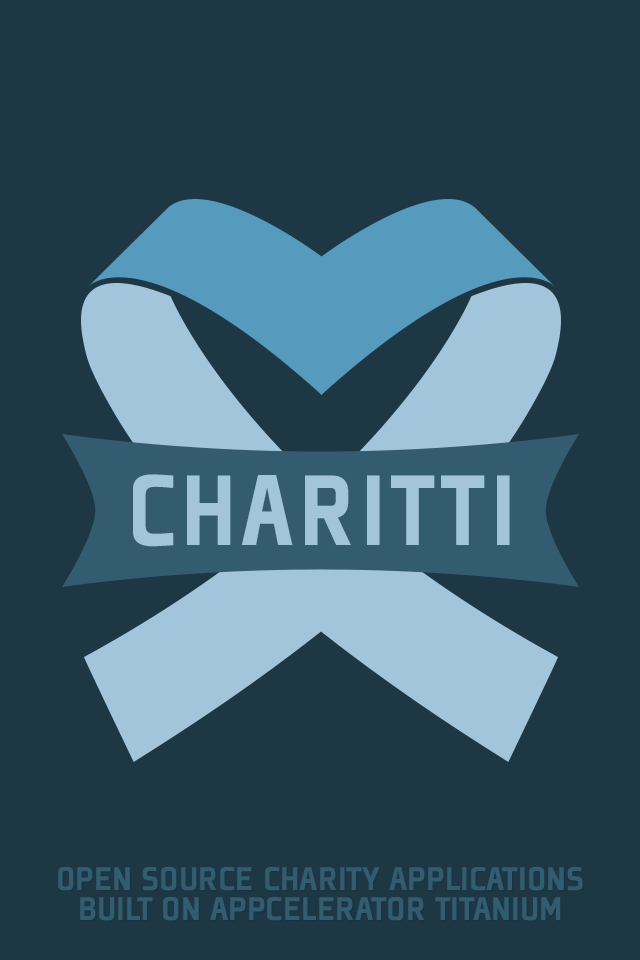
<style>
.page{position:relative;width:640px;height:960px;background:#1e3745}
.page>*{position:absolute;margin:0}
.t1{font:110px "PlexesBlackPro";letter-spacing:0.05em;color:#a3c5db;text-transform:uppercase;scale:0.93 1}
.t2{font:36px/30px "PlexesBlackPro";color:#325c70;text-transform:uppercase}
</style>
<div class="page">
<p class="t1" style="left:133px;top:474px;width:377px;height:73px">Charitti</p>
<p class="t2" style="left:58px;top:867px;width:525px;height:54px;text-align:center">OPEN SOURCE CHARITY APPLICATIONS<br>BUILT ON APPCELERATOR TITANIUM</p>
</div>
